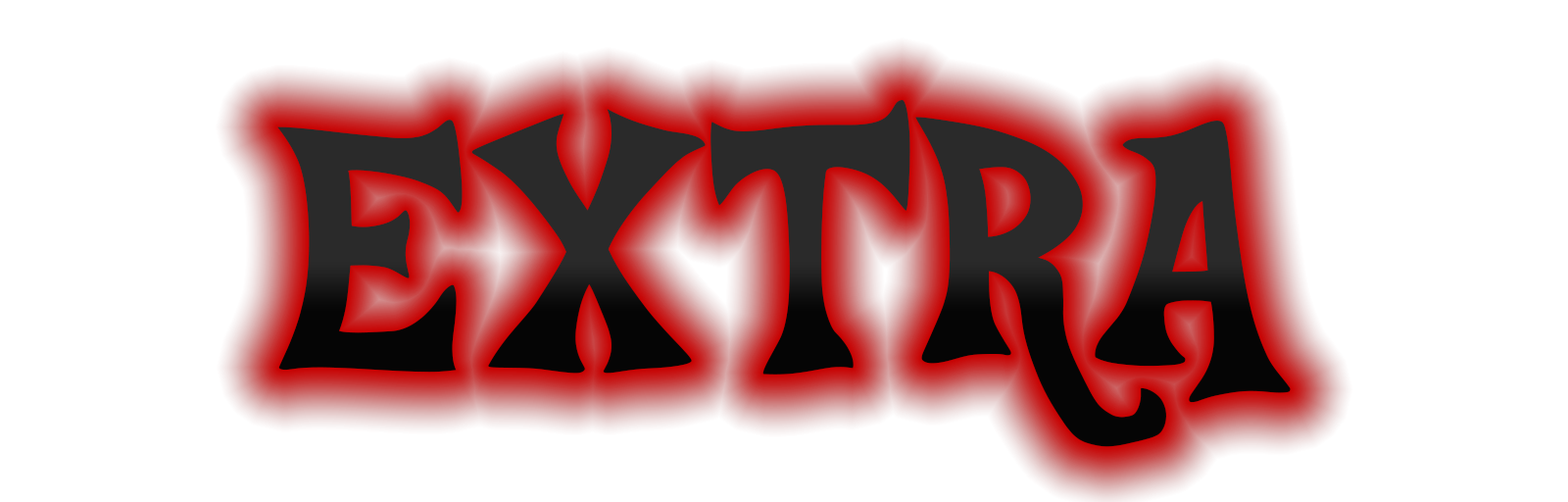
<style>
.page{position:relative;width:1568px;height:502px;background:#ffffff}
.page>*{position:absolute;margin:0}
.t1{font:392px "CelestiaReduxMedium"}
</style>
<div class="page">
<p class="t1" style="left:277px;top:100px;width:1014px;height:347px">EXTRA</p>
</div>
